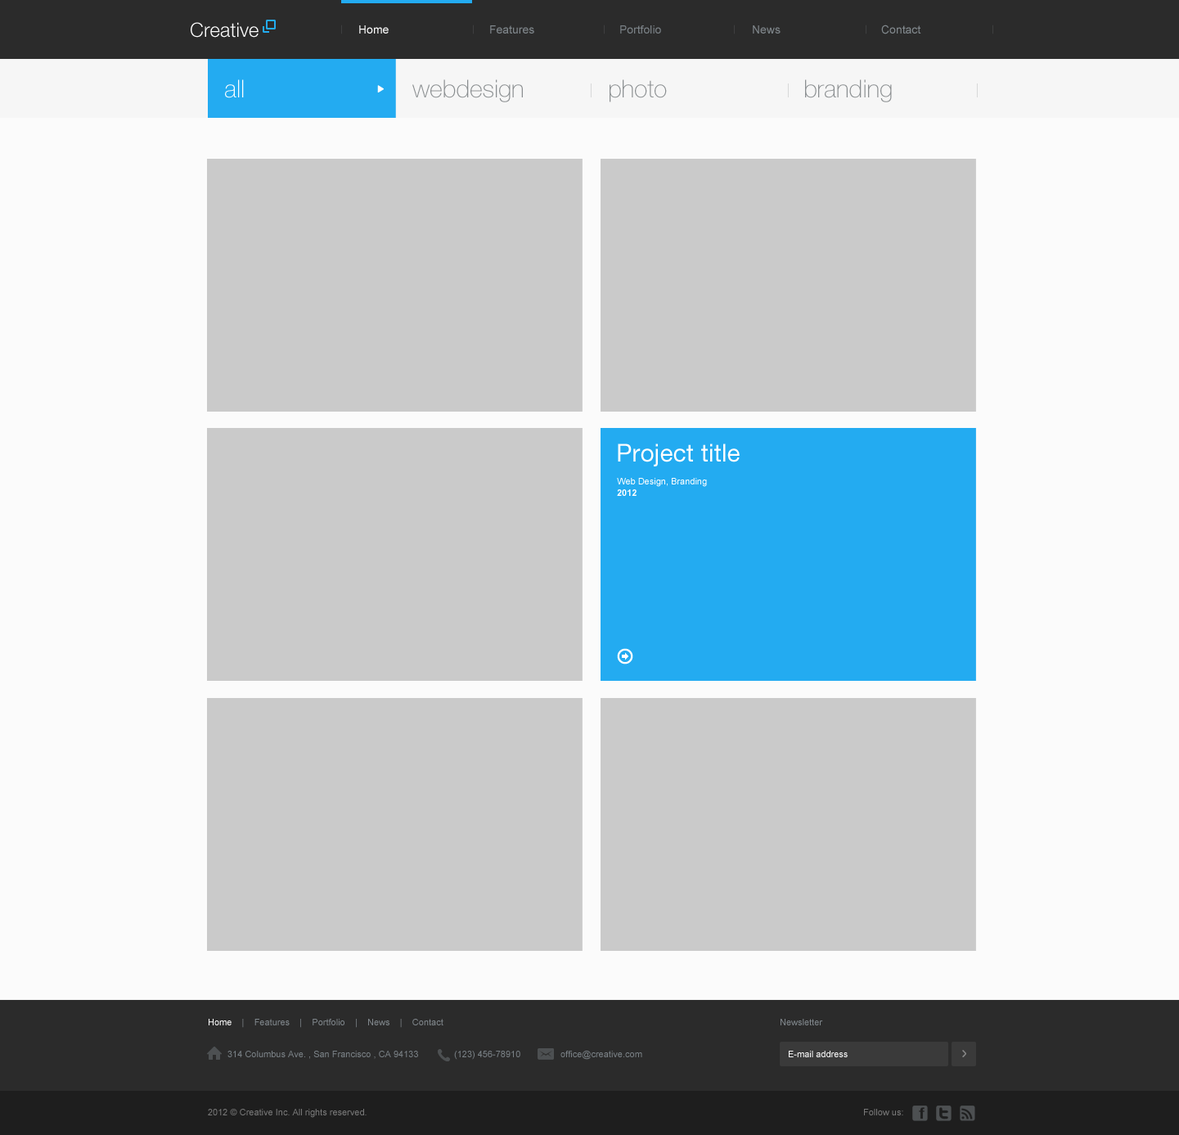
<style>
.page{position:relative;width:1179px;height:1135px;background:#cacaca}
.page>*{position:absolute;margin:0}
.t1{font:19.6px "HelveticaNeueLTStd-Lt";color:#ffffff}
.t2{font:8.5px "HelveticaNeueLTStd-Lt";scale:1.35 1}
.t3{font:11.5px "ArialMT";color:#ffffff}
.t4{font:11.5px "ArialMT";color:#80878c}
.t5{font:11.5px "ArialMT";color:#7a8186}
.t6{font:24.5px "HelveticaNeueLTStd-Th";color:#ffffff}
.t7{font:24.5px "HelveticaNeueLTStd-Th";color:#8a8e90}
.t8{font:24.5px "HelveticaNeueLTStd-Roman";color:#fffefe}
.t9{font:9px "ArialMT";color:#ffffff}
.t10{font:9px "Arial-BoldMT";color:#ffffff}
.t11{font:9px "ArialMT";color:#80878c}
.t12{font:9px "ArialMT";color:#7a8186}
.t13{font:9px "ArialMT";color:#797979}
</style>
<div class="page">
<p class="t1" style="left:191px;top:22px;width:68px;height:16px">Creative</p>
<p class="t2" style="left:341px;top:25px;width:1px;height:9px">|</p>
<p class="t3" style="left:359px;top:25px;width:30px;height:9px">Home</p>
<p class="t2" style="left:473px;top:25px;width:1px;height:9px">|</p>
<p class="t4" style="left:490px;top:25px;width:44px;height:9px">Features</p>
<p class="t2" style="left:604px;top:25px;width:1px;height:9px">|</p>
<p class="t5" style="left:620px;top:25px;width:41px;height:9px">Portfolio</p>
<p class="t2" style="left:734px;top:25px;width:1px;height:9px">|</p>
<p class="t4" style="left:753px;top:25px;width:28px;height:9px">News</p>
<p class="t2" style="left:866px;top:25px;width:0px;height:9px">|</p>
<p class="t4" style="left:881px;top:25px;width:40px;height:9px">Contact</p>
<p class="t2" style="left:992px;top:25px;width:1px;height:9px">|</p>
<p class="t6" style="left:225px;top:79px;width:19px;height:19px">all</p>
<p class="t7" style="left:412px;top:79px;width:111px;height:23px">webdesign</p>
<p class="t7" style="left:610px;top:79px;width:57px;height:23px">photo</p>
<p class="t7" style="left:805px;top:79px;width:87px;height:23px">branding</p>
<p class="t8" style="left:618px;top:443px;width:122px;height:23px">Project title</p>
<p class="t9" style="left:617px;top:478px;width:90px;height:9px">Web Design, Branding</p>
<p class="t10" style="left:617px;top:489px;width:20px;height:7px">2012</p>
<p class="t11" style="left:209px;top:1019px;width:234px;height:9px"><span class="t9">Home   </span> |    Features    |    Portfolio    |    News    |    Contact</p>
<p class="t11" style="left:781px;top:1019px;width:42px;height:6px">Newsletter</p>
<p class="t12" style="left:227px;top:1051px;width:191px;height:8px">314 Columbus Ave. , San Francisco , CA 94133</p>
<p class="t12" style="left:454px;top:1051px;width:66px;height:9px">(123) 456-78910</p>
<p class="t12" style="left:560px;top:1051px;width:82px;height:9px">office@creative.com</p>
<p class="t9" style="left:789px;top:1051px;width:59px;height:6px">E-mail address</p>
<p class="t13" style="left:208px;top:1109px;width:159px;height:9px">2012 © Creative Inc. All rights reserved.</p>
<p class="t13" style="left:864px;top:1109px;width:39px;height:6px">Follow us:</p>
</div>
